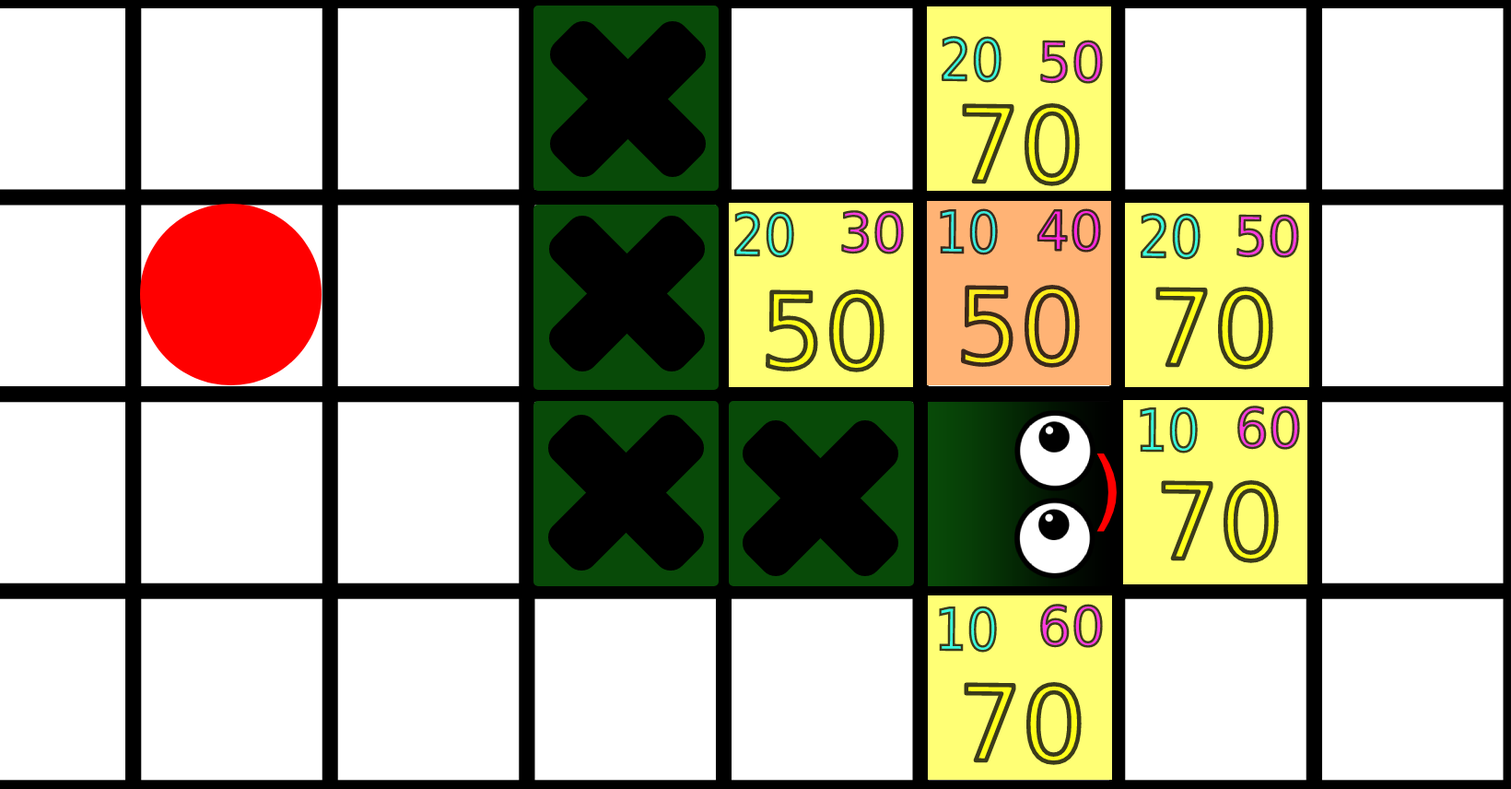
<style>
.page{position:relative;width:1511px;height:789px;background:#ffffff}
.page>*{position:absolute;margin:0}
.t1{font:57.8px "DejaVuSans";scale:0.87 1}
.t2{font:54.4px "DejaVuSans"}
.t3{font:103.6px "DejaVuSans"}
.t4{font:87.5px "DejaVuSans";color:#ff0000}
</style>
<div class="page">
<p class="t1" style="left:942px;top:36px;width:60px;height:47px;rotate:1deg">20</p>
<p class="t2" style="left:1041px;top:40px;width:62px;height:44px;rotate:1deg">50</p>
<p class="t3" style="left:961px;top:102px;width:120px;height:85px;rotate:1deg">70</p>
<p class="t1" style="left:940px;top:208px;width:58px;height:47px;rotate:1deg">10</p>
<p class="t2" style="left:1037px;top:208px;width:64px;height:45px;rotate:1deg">40</p>
<p class="t1" style="left:735px;top:211px;width:59px;height:47px;rotate:1deg">20</p>
<p class="t2" style="left:841px;top:210px;width:63px;height:44px;rotate:1deg">30</p>
<p class="t1" style="left:1141px;top:213px;width:60px;height:47px;rotate:1deg">20</p>
<p class="t2" style="left:1237px;top:214px;width:63px;height:44px;rotate:1deg">50</p>
<p class="t3" style="left:765px;top:288px;width:121px;height:85px;rotate:1deg">50</p>
<p class="t3" style="left:960px;top:284px;width:121px;height:85px;rotate:1deg">50</p>
<p class="t3" style="left:1155px;top:286px;width:120px;height:84px;rotate:1deg">70</p>
<p class="t1" style="left:1140px;top:406px;width:58px;height:47px;rotate:1deg">10</p>
<p class="t2" style="left:1238px;top:406px;width:62px;height:44px;rotate:1deg">60</p>
<p class="t4" style="left:1097px;top:453px;width:20px;height:79px">)</p>
<p class="t3" style="left:1160px;top:479px;width:120px;height:85px;rotate:1deg">70</p>
<p class="t1" style="left:939px;top:606px;width:58px;height:47px;rotate:1deg">10</p>
<p class="t2" style="left:1041px;top:604px;width:62px;height:44px;rotate:1deg">60</p>
<p class="t3" style="left:963px;top:681px;width:120px;height:85px;rotate:1deg">70</p>
</div>
